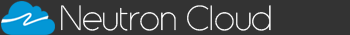
<style>
.page{position:relative;width:350px;height:35px;background:#333333}
.page>*{position:absolute;margin:0}
.t1{font:34.9px "Generica";color:#ffffff}
</style>
<div class="page">
<p class="t1" style="left:61px;top:5px;width:210px;height:26px">Neutron Cloud</p>
</div>
